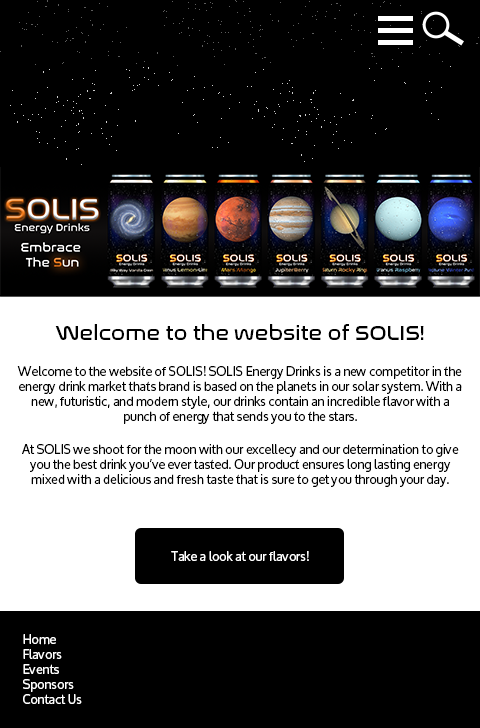
<style>
.page{position:relative;width:480px;height:728px;background:#000000}
.page>*{position:absolute;margin:0}
.t1{font:20.8px "NasalizationRg-Regular";color:#000000}
.t2{font:12.5px "Oxygen";color:#000000}
.t3{font:12.5px "Oxygen";color:#ffffff}
</style>
<div class="page">
<p class="t1" style="left:55px;top:324px;width:369px;height:16px">Welcome to the website of SOLIS!</p>
<p class="t2" style="left:17px;top:366px;width:445px;height:58px;text-align:center">Welcome to the website of SOLIS! SOLIS Energy Drinks is a new competitor in the energy drink market thats brand is based on the planets in our solar system. With a new, futuristic, and modern style, our drinks contain an incredible flavor with a punch of energy that sends you to the stars.</p>
<p class="t2" style="left:22px;top:444px;width:437px;height:43px;text-align:center">At SOLIS we shoot for the moon with our excellecy and our determination to give you the best drink you’ve ever tasted. Our product ensures long lasting energy mixed with a delicious and fresh taste that is sure to get you through your day.</p>
<p class="t3" style="left:171px;top:551px;width:138px;height:10px">Take a look at our flavors!</p>
<p class="t3" style="left:23px;top:634px;width:59px;height:70px">Home<br>Flavors<br>Events<br>Sponsors<br>Contact Us</p>
</div>
